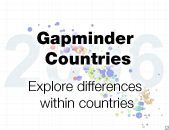
<style>
.page{position:relative;width:169px;height:130px;background:#ffffff}
.page>*{position:absolute;margin:0}
.t1{font:17px "HelveticaNeueLTStd-Blk";color:#000000}
.t2{font:14px "HelveticaNeueLTStd-Lt";color:#000000}
</style>
<div class="page">
<p class="t1" style="left:37px;top:31px;width:97px;height:34px;text-align:center">Gapminder <br>Countries</p>
<p class="t2" style="left:29px;top:81px;width:113px;height:27px;text-align:center">Explore differences <br>within countries</p>
</div>
